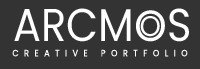
<style>
.page{position:relative;width:200px;height:69px;background:#333333}
.page>*{position:absolute;margin:0}
.t1{font:46px "Poppins-Regular";color:#ffffff;scale:0.9 1}
.t2{font:43.5px "Poppins-Regular";color:#ffffff;scale:0.95 1}
.t3{font:28.4px "Poppins-Regular";color:#ffffff;scale:0.95 1}
.t4{font:9px "Poppins-Regular";letter-spacing:0.68em;color:#ffffff;text-transform:uppercase;scale:0.9 1}
</style>
<div class="page">
<p class="t1" style="left:14px;top:8px;width:175px;height:34px">ARCM   S</p>
<p class="t2" style="left:136px;top:10px;width:29px;height:32px">O</p>
<p class="t3" style="left:140px;top:16px;width:20px;height:21px">O</p>
<p class="t4" style="left:12px;top:49px;width:176px;height:8px">creative poRTFOLIO</p>
</div>
